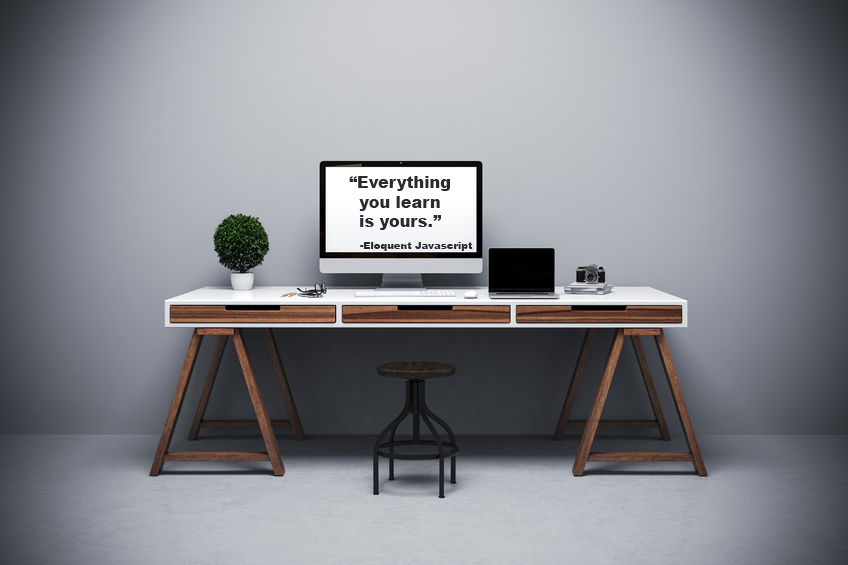
<style>
.page{position:relative;width:848px;height:565px}
.page>*{position:absolute;margin:0}
.t1{font:16px "Arial-Black";color:#292b31}
.t2{font:10px "Arial-Black";color:#292b31}
</style>
<div class="page">
<p class="t1" style="left:349px;top:176px;width:101px;height:54px;text-align:center">“Everything<br>you learn<br>is yours.”</p>
<p class="t2" style="left:360px;top:242px;width:113px;height:9px">-Eloquent Javascript</p>
</div>
